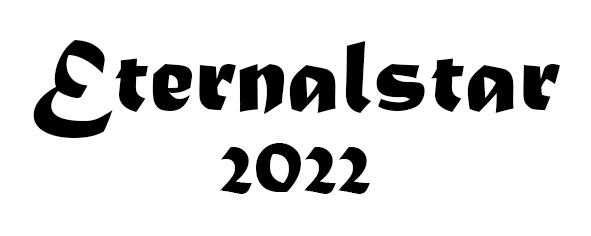
<style>
.page{position:relative;width:591px;height:236px;background:#ffffff}
.page>*{position:absolute;margin:0}
.t1{font:108.3px "MaturaMTScriptCapitals";color:#000000}
.t2{font:75px "MaturaMTScriptCapitals";color:#000000}
</style>
<div class="page">
<p class="t1" style="left:33px;top:40px;width:527px;height:98px">Eternalstar</p>
<p class="t2" style="left:220px;top:143px;width:150px;height:51px">2022</p>
</div>
